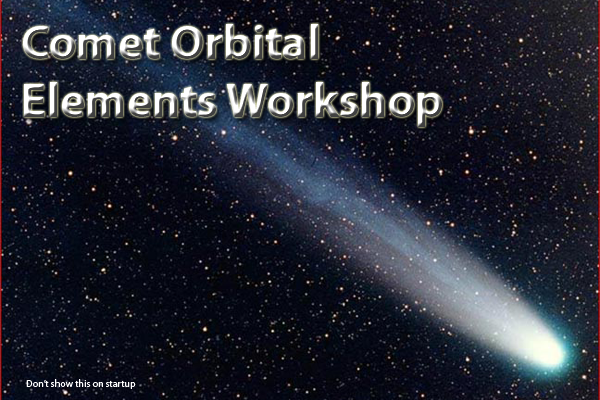
<style>
.page{position:relative;width:600px;height:400px}
.page>*{position:absolute;margin:0}
.t1{font:48px "MyriadPro-Bold"}
.t2{font:10px "MyriadPro-Regular";color:#ffffff}
</style>
<div class="page">
<p class="t1" style="left:23px;top:24px;width:419px;height:103px">Comet Orbital<br>Elements Workshop</p>
<p class="t2" style="left:26px;top:379px;width:110px;height:10px">Don’t show this on startup</p>
</div>
